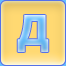
<style>
.page{position:relative;width:66px;height:66px}
.page>*{position:absolute;margin:0}
.t1{font:41px "Tahoma-Bold"}
</style>
<div class="page">
<p class="t1" style="left:17px;top:15px;width:32px;height:37px">Д</p>
<p class="t1" style="left:17px;top:15px;width:32px;height:37px">Д</p>
</div>
